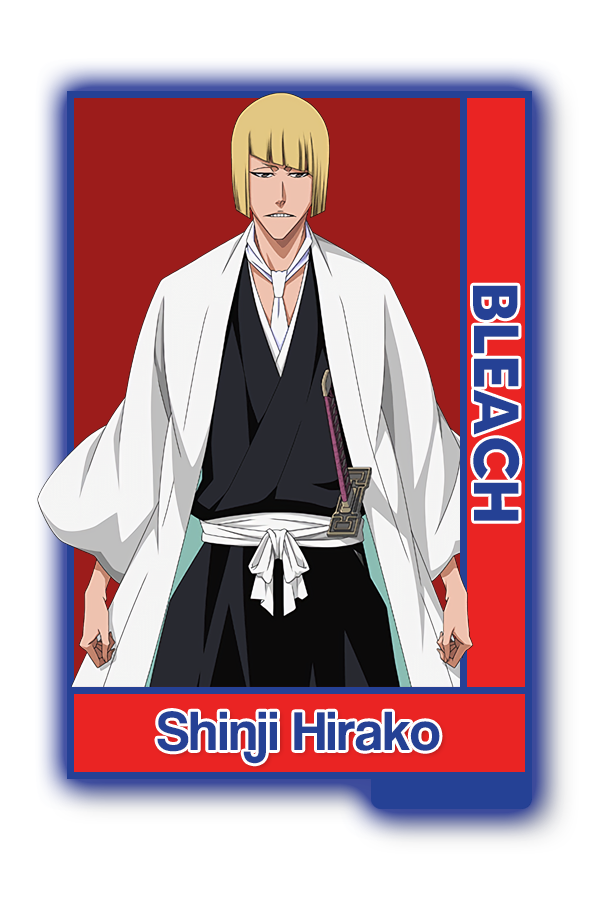
<style>
.page{position:relative;width:600px;height:900px;background:#ffffff}
.page>*{position:absolute;margin:0}
.t1{font:63.6px "MADETOMMY-Bold";color:#254195}
.t2{font:56.7px "CoolveticaRg-Regular";color:#254195}
</style>
<div class="page">
<p class="t1" style="left:473px;top:285px;width:47px;height:236px;rotate:90deg">BLEACH</p>
<p class="t2" style="left:157px;top:711px;width:283px;height:53px">Shinji Hirako</p>
</div>
